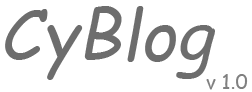
<style>
.page{position:relative;width:252px;height:92px;background:#ffffff}
.page>*{position:absolute;margin:0}
.t1{font:42px "ComicSansMS-Italic";color:#6d6d6d}
.t2{font:12px "ComicSansMS";color:#808080}
</style>
<div class="page">
<p class="t1" style="left:5px;top:6px;width:210px;height:74px">CyBlog</p>
<p class="t2" style="left:206px;top:74px;width:42px;height:16px">v 1.0</p>
</div>
